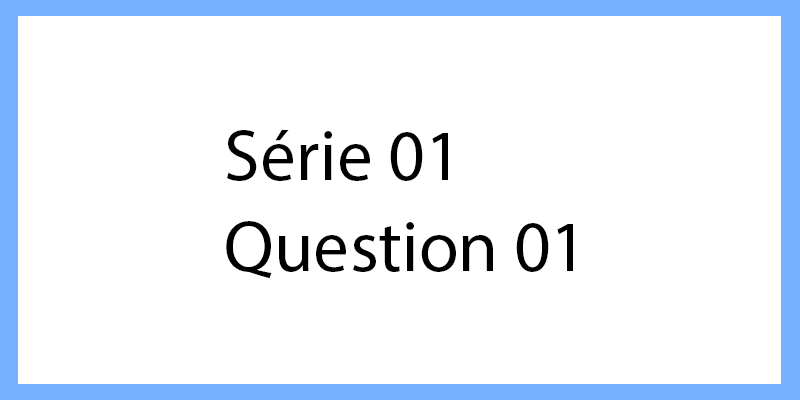
<style>
.page{position:relative;width:800px;height:400px;background:#ffffff}
.page>*{position:absolute;margin:0}
.t1{font:72px "MyriadPro-Regular";color:#000000}
</style>
<div class="page">
<p class="t1" style="left:227px;top:130px;width:221px;height:51px">Série 01</p>
<p class="t1" style="left:226px;top:221px;width:347px;height:58px">Question 01</p>
</div>
